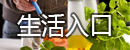
<style>
.page{position:relative;width:130px;height:50px}
.page>*{position:absolute;margin:0}
.t1{font:24.7px "MicrosoftYaHei";color:#ffffff}
</style>
<div class="page">
<p class="t1" style="left:17px;top:14px;width:94px;height:23px">生活入口</p>
</div>
